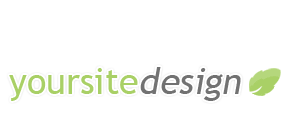
<style>
.page{position:relative;width:283px;height:121px;background:#ffffff}
.page>*{position:absolute;margin:0}
.t1{font:36px "TrebuchetMS";color:#a9d066}
.t2{font:36px "TrebuchetMS";color:#727272;font-style:italic}
</style>
<div class="page">
<p class="t1" style="left:9px;top:67px;width:232px;height:34px">yoursite<span class="t2">design</span></p>
</div>
